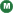
<style>
.page{position:relative;width:13px;height:13px;background:#24763e}
.page>*{position:absolute;margin:0}
.t1{font:8px "Arial-Black";color:#ffffff}
</style>
<div class="page">
<p class="t1" style="left:3px;top:3px;width:7px;height:6px">M</p>
</div>
